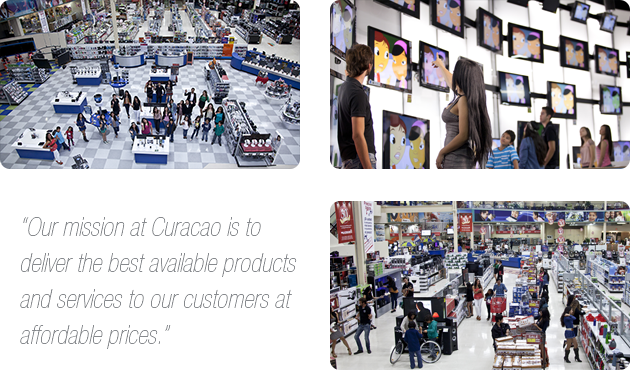
<style>
.page{position:relative;width:630px;height:370px;background:#ffffff}
.page>*{position:absolute;margin:0}
.t1{font:26px/36px "HelveticaNeue-UltraLigCondObl";color:#878a8e}
</style>
<div class="page">
<p class="t1" style="left:20px;top:217px;width:277px;height:132px">“Our mission at Curacao is to <br>deliver the best available products and services to our customers at affordable prices.”</p>
</div>
